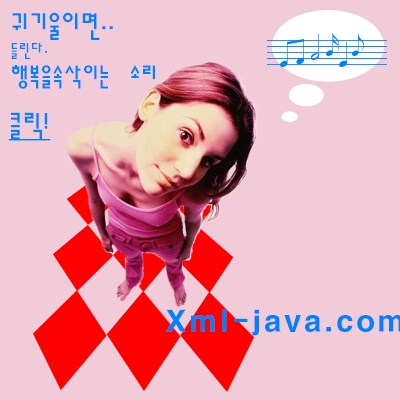
<style>
.page{position:relative;width:400px;height:400px;background:#f1cbd8}
.page>*{position:absolute;margin:0}
.t1{font:24.4px/22px "H2sa1M";letter-spacing:0.04em;color:#0082ff;scale:1.05 1}
.t2{font:28.5px/30.8px "H2sa1M";letter-spacing:0.04em;color:#0082ff;scale:1.05 1}
.t3{font:17.1px/22px "H2sa1M";letter-spacing:0.04em;color:#0082ff;scale:1.05 1}
.t4{font:28.3px "H2sa1M";letter-spacing:0.04em;color:#0082ff;text-decoration:underline;scale:1.08 1}
</style>
<div class="page">
<p class="t1" style="left:11px;top:12px;width:144px;height:77px"><span class="t2">귀기울이면..<br></span><span class="t3">들린다.<br></span>행복을속삭이는  소리</p>
<p class="t4" style="left:8px;top:112px;width:43px;height:29px">클릭!</p>
</div>
